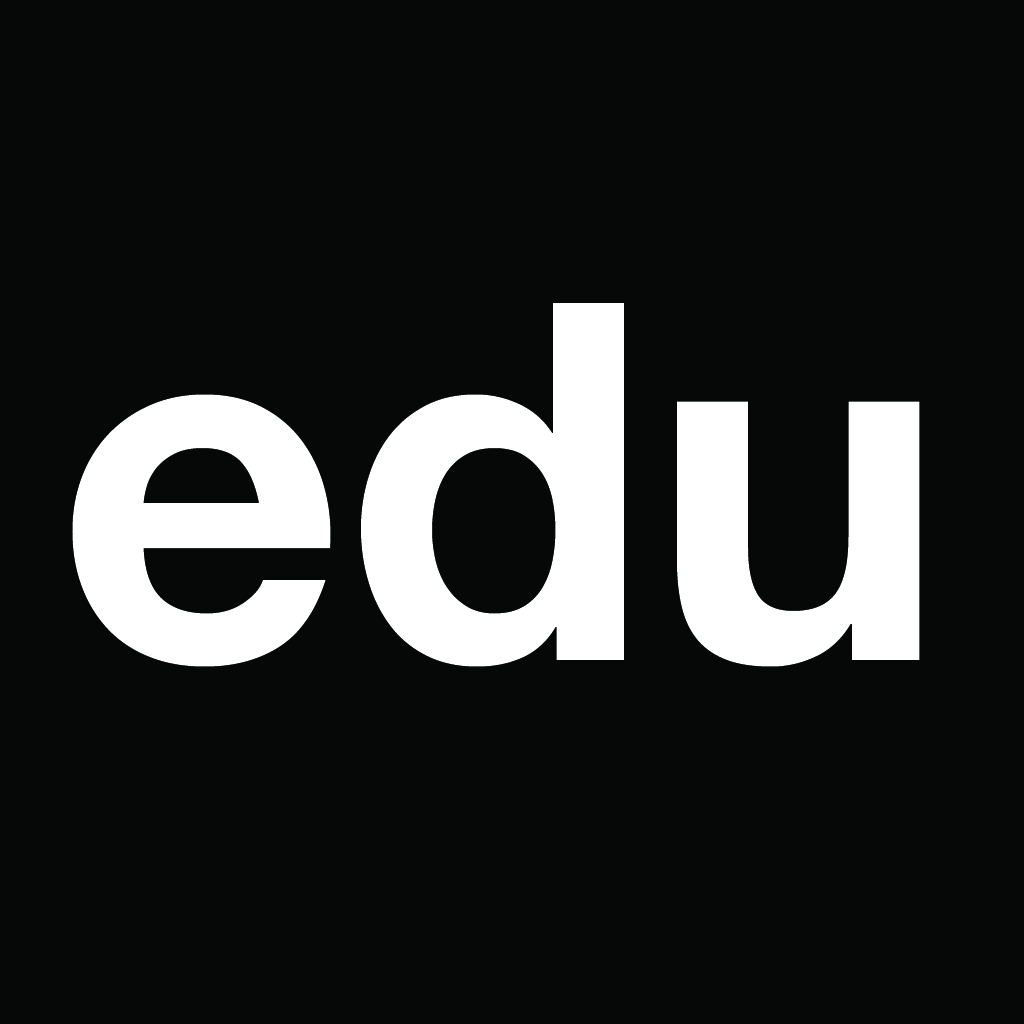
<style>
.page{position:relative;width:1024px;height:1024px;background:#060808}
.page>*{position:absolute;margin:0}
.t1{font:500px "HelveticaNeue-Bold";color:#ffffff}
</style>
<div class="page">
<p class="t1" style="left:72px;top:303px;width:848px;height:364px">edu</p>
</div>
